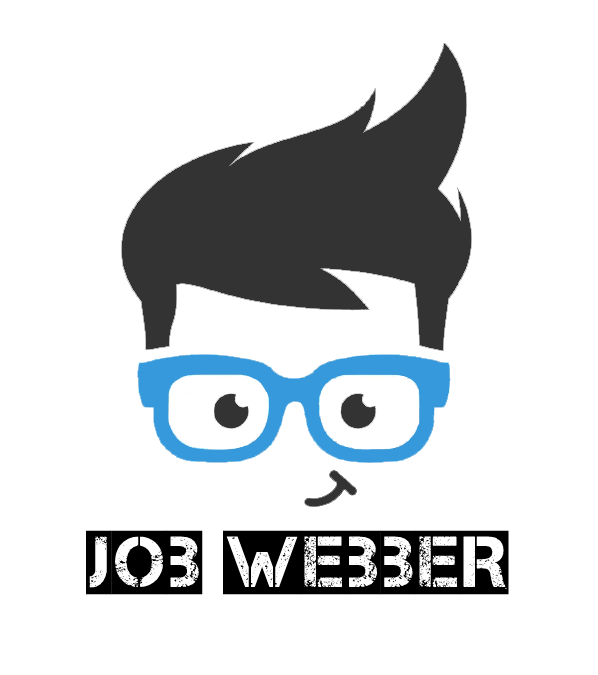
<style>
.page{position:relative;width:598px;height:675px;background:#ffffff}
.page>*{position:absolute;margin:0}
.t1{font:72px "Captureit2";color:#000000}
</style>
<div class="page">
<p class="t1" style="left:85px;top:530px;width:424px;height:65px">Job Webber</p>
</div>
